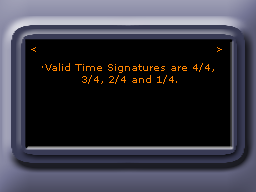
<style>
.page{position:relative;width:256px;height:192px;background:#000000}
.page>*{position:absolute;margin:0}
.t1{font:9px "MSReferenceSansSerif";color:#ff8400}
.t2{font:10px "MSReferenceSansSerif";color:#ff8400}
</style>
<div class="page">
<p class="t1" style="left:31px;top:47px;width:5px;height:5px">&lt;</p>
<p class="t1" style="left:217px;top:47px;width:5px;height:5px">&gt;</p>
<p class="t2" style="left:42px;top:63px;width:172px;height:21px;text-align:center">·Valid Time Signatures are 4/4, <br>3/4, 2/4 and 1/4.</p>
</div>
